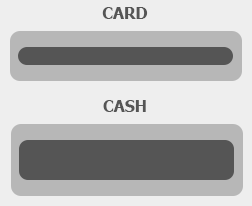
<style>
.page{position:relative;width:252px;height:206px;background:#eeeeee}
.page>*{position:absolute;margin:0}
.t1{font:16px "Tahoma-Bold";color:#555555}
</style>
<div class="page">
<p class="t1" style="left:102px;top:7px;width:46px;height:12px">CARD</p>
<p class="t1" style="left:103px;top:100px;width:43px;height:12px">CASH</p>
</div>
